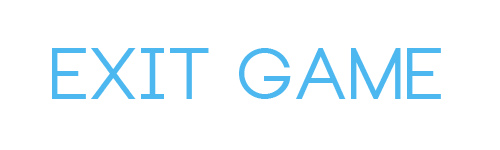
<style>
.page{position:relative;width:500px;height:150px;background:#ffffff}
.page>*{position:absolute;margin:0}
.t1{font:72px "Neou-Bold";color:#4db8f0}
</style>
<div class="page">
<p class="t1" style="left:52px;top:48px;width:389px;height:51px">exit game</p>
</div>
